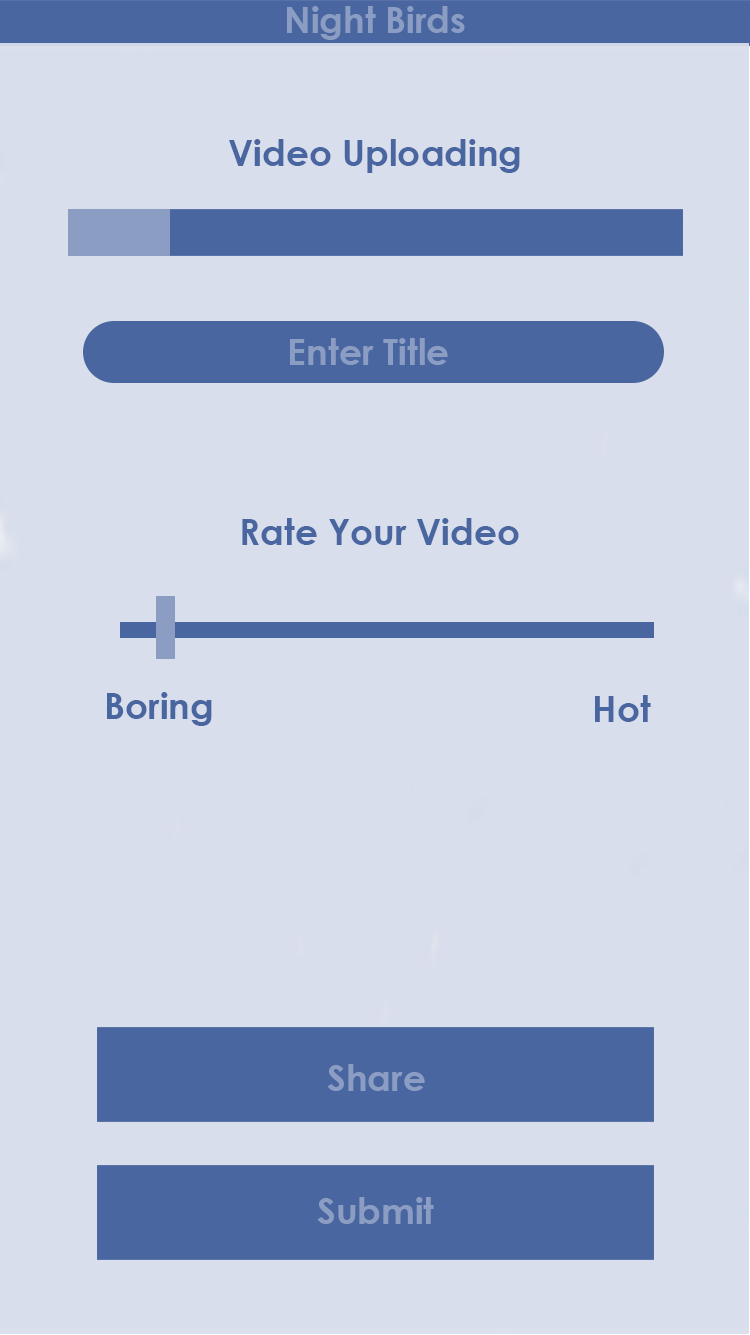
<style>
.page{position:relative;width:750px;height:1335px;background:#d8deeb}
.page>*{position:absolute;margin:0}
.t1{font:36px "CenturyGothic-Bold";color:#8b9dc3}
.t2{font:36px "CenturyGothic-Bold";color:#4966a0}
</style>
<div class="page">
<p class="t1" style="left:287px;top:6px;width:178px;height:34px">Night Birds</p>
<p class="t2" style="left:229px;top:139px;width:291px;height:34px">Video Uploading</p>
<p class="t1" style="left:290px;top:338px;width:158px;height:27px">Enter Title</p>
<p class="t2" style="left:242px;top:518px;width:277px;height:27px">Rate Your Video</p>
<p class="t2" style="left:107px;top:692px;width:105px;height:34px">Boring</p>
<p class="t2" style="left:595px;top:695px;width:56px;height:27px">Hot</p>
<p class="t1" style="left:327px;top:1064px;width:98px;height:27px">Share</p>
<p class="t1" style="left:317px;top:1197px;width:117px;height:27px">Submit</p>
</div>
